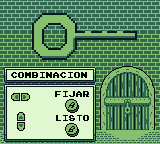
<style>
.page{position:relative;width:160px;height:144px;background:#306850}
.page>*{position:absolute;margin:0}
.t1{font:7px "PressStart2P";color:#000000}
</style>
<div class="page">
<p class="t1" style="left:11px;top:72px;width:76px;height:6px">COMBINACION</p>
<p class="t1" style="left:55px;top:91px;width:34px;height:6px">FIJAR</p>
<p class="t1" style="left:56px;top:115px;width:33px;height:6px">LISTO</p>
</div>
